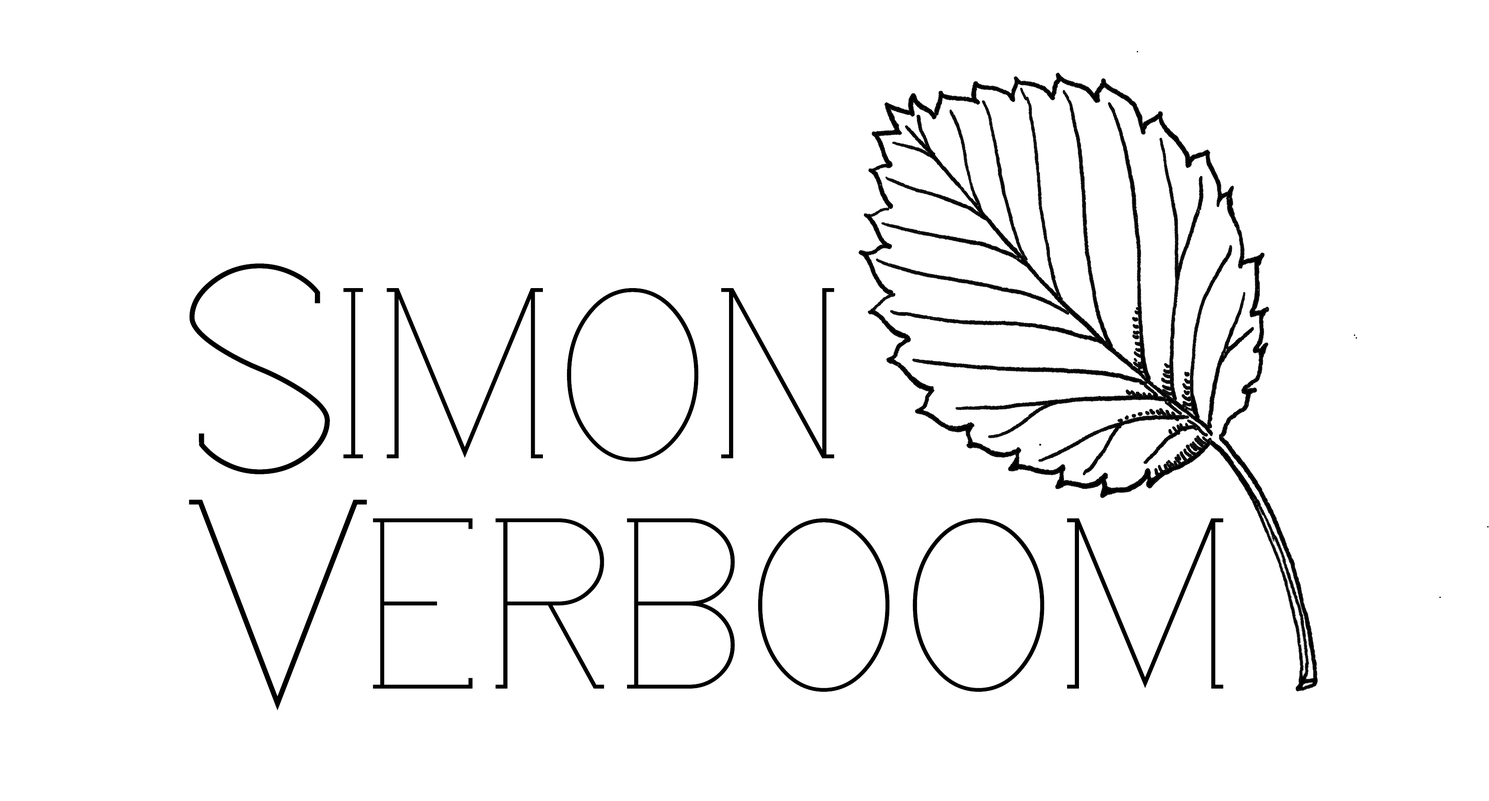
<style>
.page{position:relative;width:1489px;height:801px;background:#ffffff}
.page>*{position:absolute;margin:0}
.t1{font:300.6px "Espacio";letter-spacing:0.08em;color:#000000;scale:1.05 1}
.t2{font:242.8px "Espacio";letter-spacing:0.045em;color:#000000;scale:1.05 1}
</style>
<div class="page">
<p class="t1" style="left:189px;top:263px;width:141px;height:211px">S</p>
<p class="t2" style="left:343px;top:288px;width:491px;height:173px">IMON</p>
<p class="t1" style="left:189px;top:500px;width:178px;height:210px">V</p>
<p class="t2" style="left:373px;top:518px;width:850px;height:174px">ERBOOM</p>
</div>
